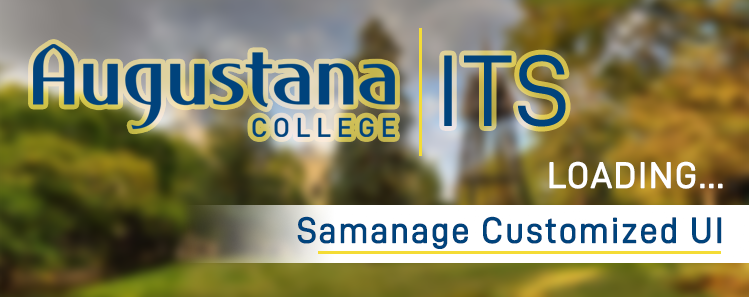
<style>
.page{position:relative;width:749px;height:297px}
.page>*{position:absolute;margin:0}
.t1{font:101.5px "D-DIN";letter-spacing:0.025em;color:#00437c}
.t2{font:36.2px "D-DIN";letter-spacing:0.025em;color:#ffffff;font-weight:bold}
.t3{font:36.2px "D-DIN";letter-spacing:0.025em;color:#00437c;font-weight:bold}
</style>
<div class="page">
<p class="t1" style="left:444px;top:54px;width:122px;height:73px">ITS</p>
<p class="t2" style="left:549px;top:161px;width:174px;height:28px">LOADING...</p>
<p class="t3" style="left:297px;top:216px;width:425px;height:33px">Samanage Customized UI</p>
</div>
